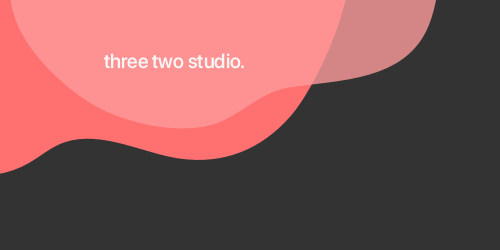
<style>
.page{position:relative;width:500px;height:250px;background:#333333}
.page>*{position:absolute;margin:0}
.t1{font:20.2px "SFProDisplay-Medium";color:#f7f6f6}
</style>
<div class="page">
<p class="t1" style="left:104px;top:53px;width:140px;height:16px">three two studio.</p>
</div>
